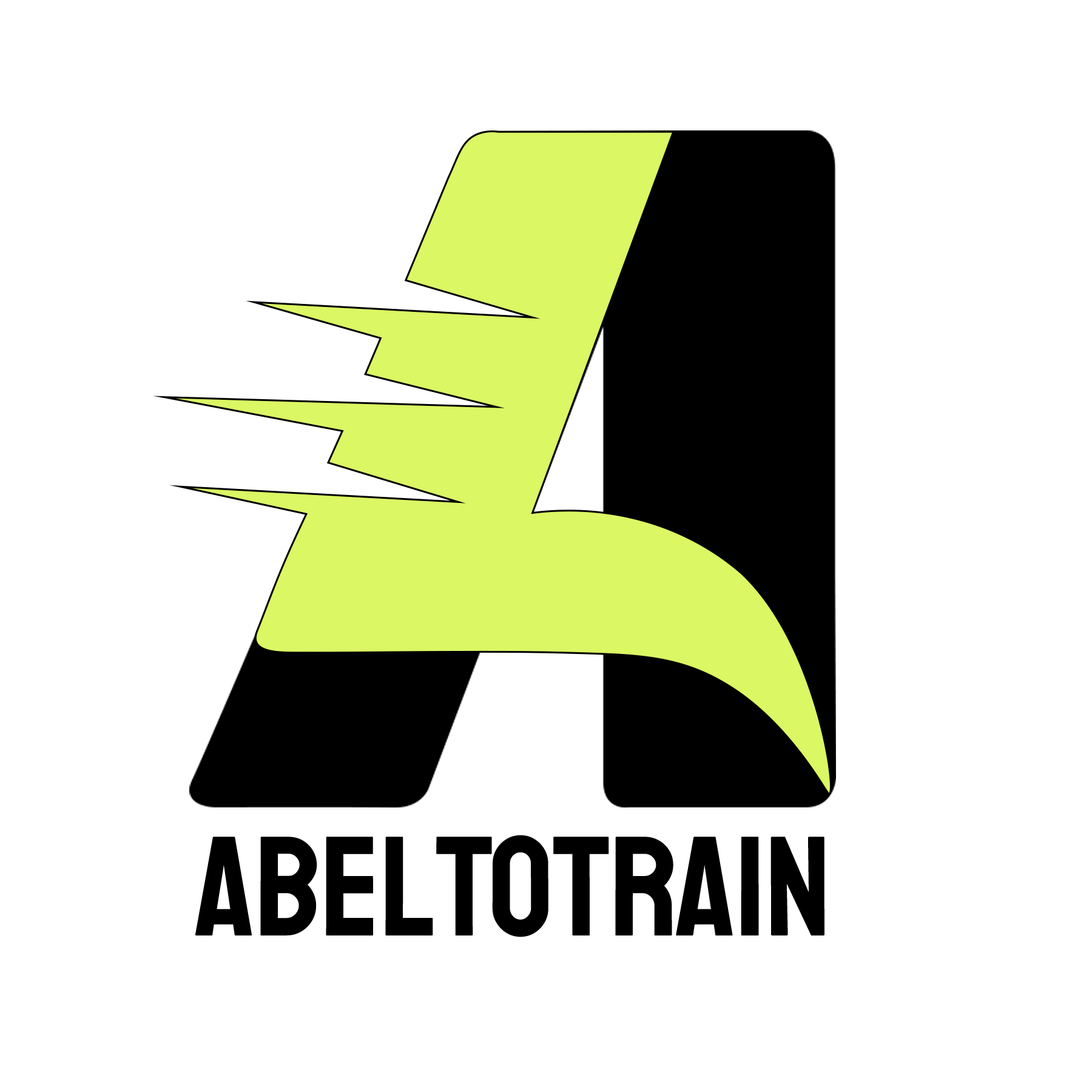
<style>
.page{position:relative;width:1092px;height:1092px;background:#ffffff}
.page>*{position:absolute;margin:0}
.t1{font:141.6px "Bayon-Regular";color:#000000}
</style>
<div class="page">
<p class="t1" style="left:195px;top:835px;width:629px;height:102px">AbelToTrain</p>
</div>
